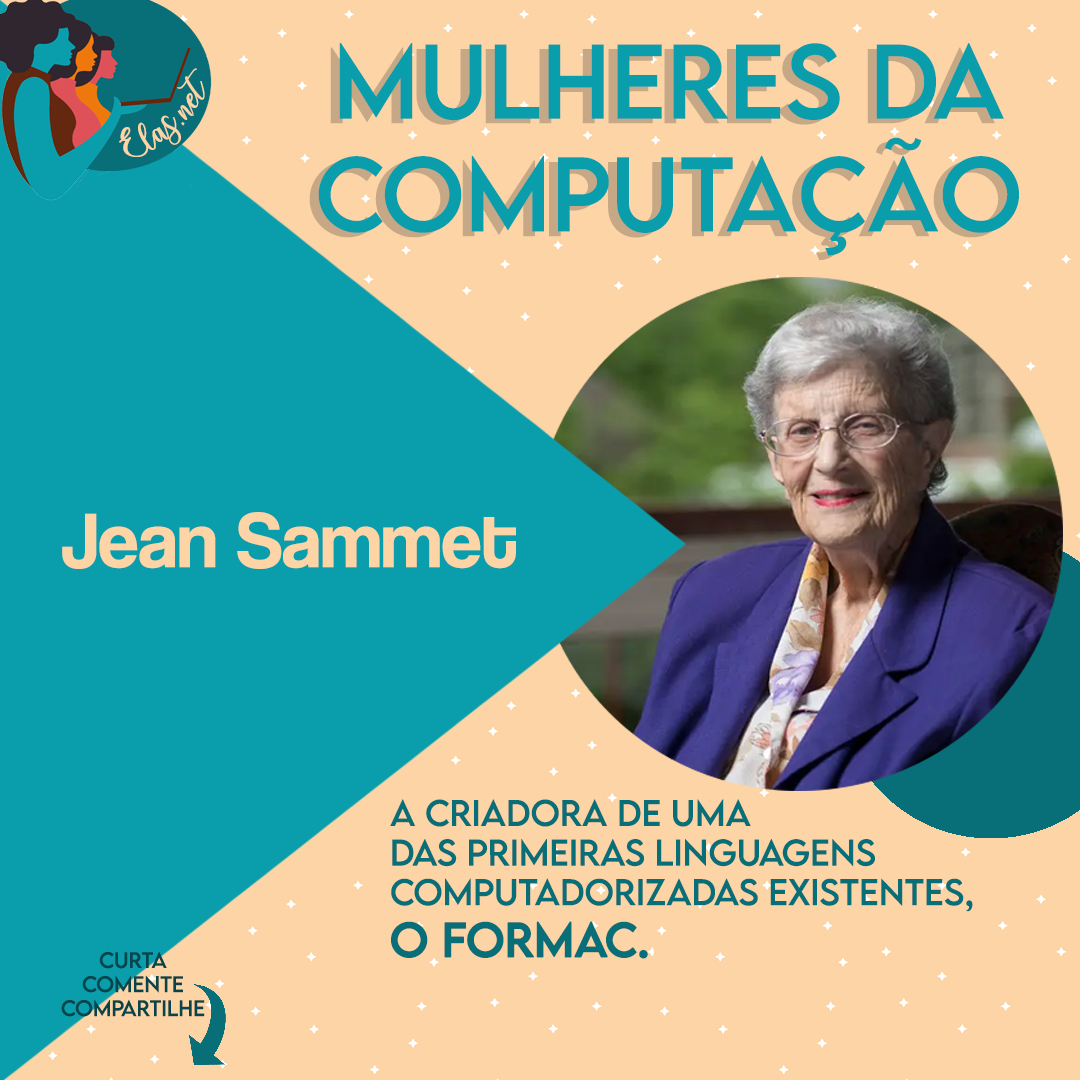
<style>
.page{position:relative;width:1080px;height:1080px;background:#fcd4a5}
.page>*{position:absolute;margin:0}
.t1{font:94px "LEMONMILK-Regular"}
.t2{font:94px "LEMONMILK-Regular";color:#0a9eac}
.t3{font:25px "charlinda-Regular";color:#fcd4a5;scale:1.18 1}
.t4{font:80px "CoolveticaRg-Regular";color:#fcd4a5}
.t5{font:33px "LEMONMILK-Regular";color:#086e78}
.t6{font:43px "LEMONMILK-Regular";color:#086e78;font-weight:bold}
.t7{font:20px "LEMONMILK-Regular";color:#05454b}
</style>
<div class="page">
<p class="t1" style="left:309px;top:47px;width:701px;height:213px;text-align:center">Mulheres da<br>Computação</p>
<p class="t2" style="left:318px;top:43px;width:701px;height:213px;text-align:center">Mulheres da<br>Computação</p>
<p class="t3" style="left:119px;top:68px;width:86px;height:89px;rotate:-43deg">Elas.net</p>
<p class="t4" style="left:62px;top:512px;width:454px;height:57px">Jean Sammet</p>
<p class="t5" style="left:390px;top:799px;width:583px;height:160px">A criadora de uma<br>das primeiras linguagens <br>computadorizadas existentes, <br><span class="t6">O FORMAC.</span></p>
<p class="t7" style="left:61px;top:951px;width:144px;height:66px;text-align:center">Curta<br>Comente<br>Compartilhe</p>
</div>
